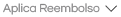
<style>
.page{position:relative;width:121px;height:17px;background:#ffffff}
.page>*{position:absolute;margin:0}
.t1{font:12px "Questrial-Regular";color:#858586}
</style>
<div class="page">
<p class="t1" style="left:3px;top:3px;width:97px;height:12px">Aplica Reembolso</p>
</div>
